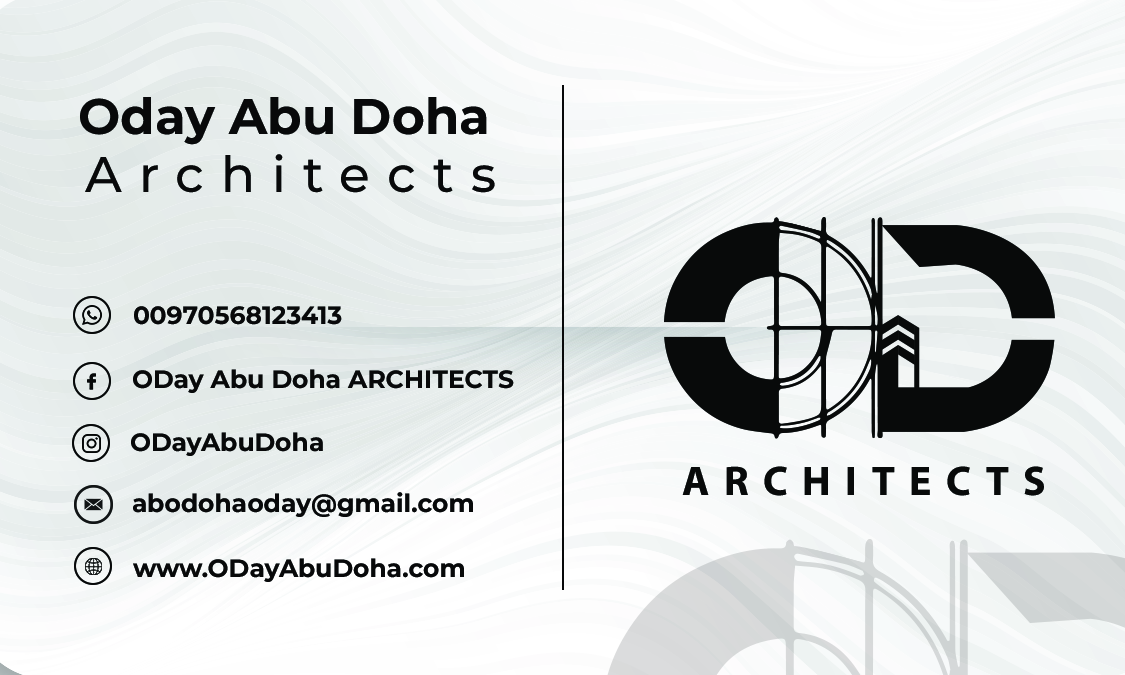
<style>
.page{position:relative;width:1125px;height:675px}
.page>*{position:absolute;margin:0}
.t1{font:50px "Montserrat-Bold";color:#08090a}
.t2{font:50px "Montserrat-Medium";letter-spacing:0.34em;color:#08090a}
.t3{font:25px "Montserrat-Bold";color:#08090a}
</style>
<div class="page">
<p class="t1" style="left:80px;top:97px;width:407px;height:48px">Oday Abu Doha</p>
<p class="t2" style="left:85px;top:154px;width:410px;height:39px">Architects</p>
<p class="t3" style="left:134px;top:306px;width:208px;height:19px">00970568123413</p>
<p class="t3" style="left:133px;top:369px;width:381px;height:24px">ODay Abu Doha ARCHITECTS</p>
<p class="t3" style="left:131px;top:432px;width:192px;height:24px">ODayAbuDoha</p>
<p class="t3" style="left:133px;top:492px;width:340px;height:25px">abodohaoday@gmail.com</p>
<p class="t3" style="left:133px;top:558px;width:331px;height:24px">www.ODayAbuDoha.com</p>
</div>
